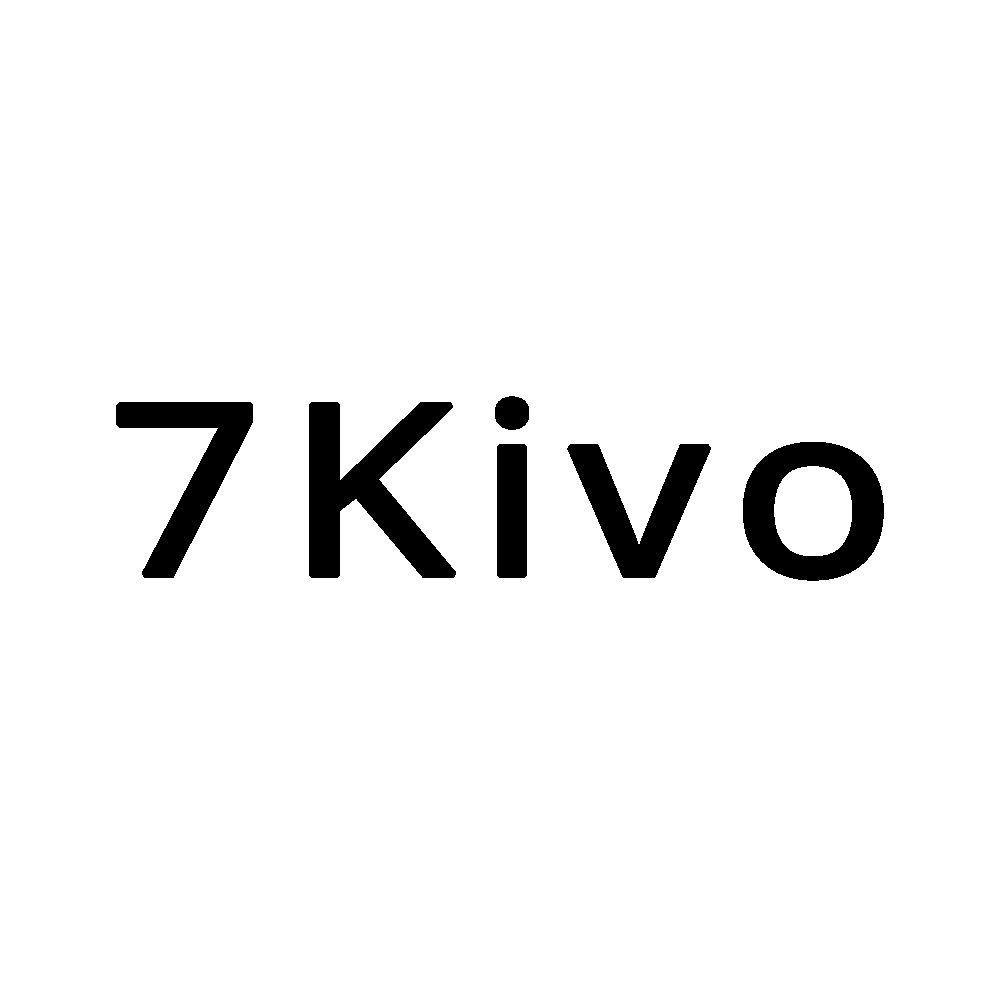
<style>
.page{position:relative;width:1000px;height:1000px;background:#ffffff}
.page>*{position:absolute;margin:0}
.t1{font:237.6px "SansSerifCollection";letter-spacing:0.06em;color:#000000;font-weight:bold;scale:1.14 1}
</style>
<div class="page">
<p class="t1" style="left:116px;top:396px;width:768px;height:185px">7Kivo</p>
</div>
